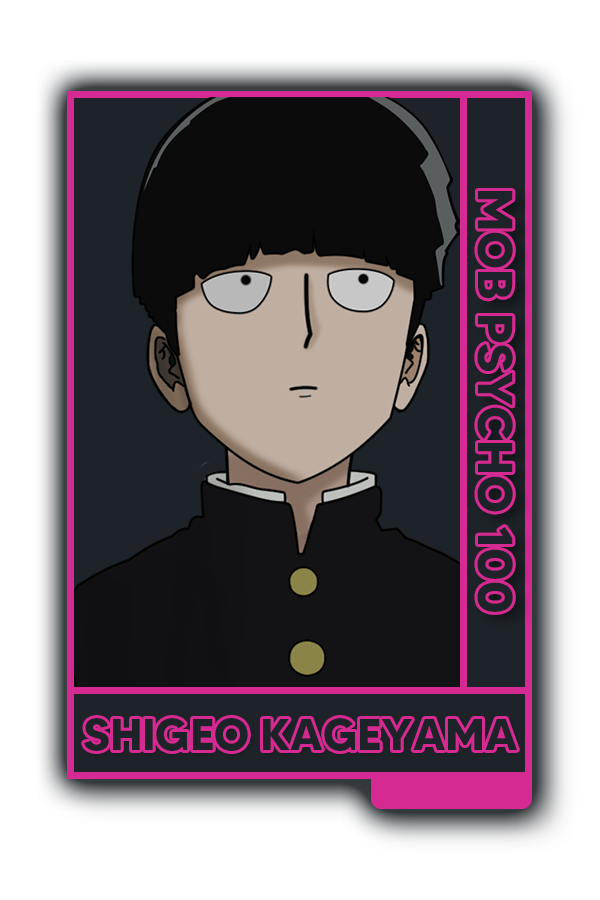
<style>
.page{position:relative;width:600px;height:900px;background:#ffffff}
.page>*{position:absolute;margin:0}
.t1{font:48.8px "MADETOMMY-Bold";color:#1d2328}
.t2{font:44.8px "MADETOMMY-Bold";color:#1d2328}
</style>
<div class="page">
<p class="t1" style="left:477px;top:191px;width:36px;height:421px;rotate:90deg">MOB PSYCHO 100</p>
<p class="t2" style="left:84px;top:718px;width:433px;height:33px">SHIGEO KAGEYAMA</p>
</div>
